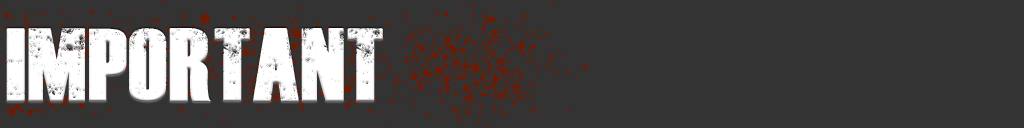
<style>
.page{position:relative;width:1024px;height:128px;background:#333333}
.page>*{position:absolute;margin:0}
.t1{font:72px "DeadKansas";color:#ffffff}
</style>
<div class="page">
<p class="t1" style="left:6px;top:28px;width:377px;height:74px">IMPORTANT</p>
</div>
